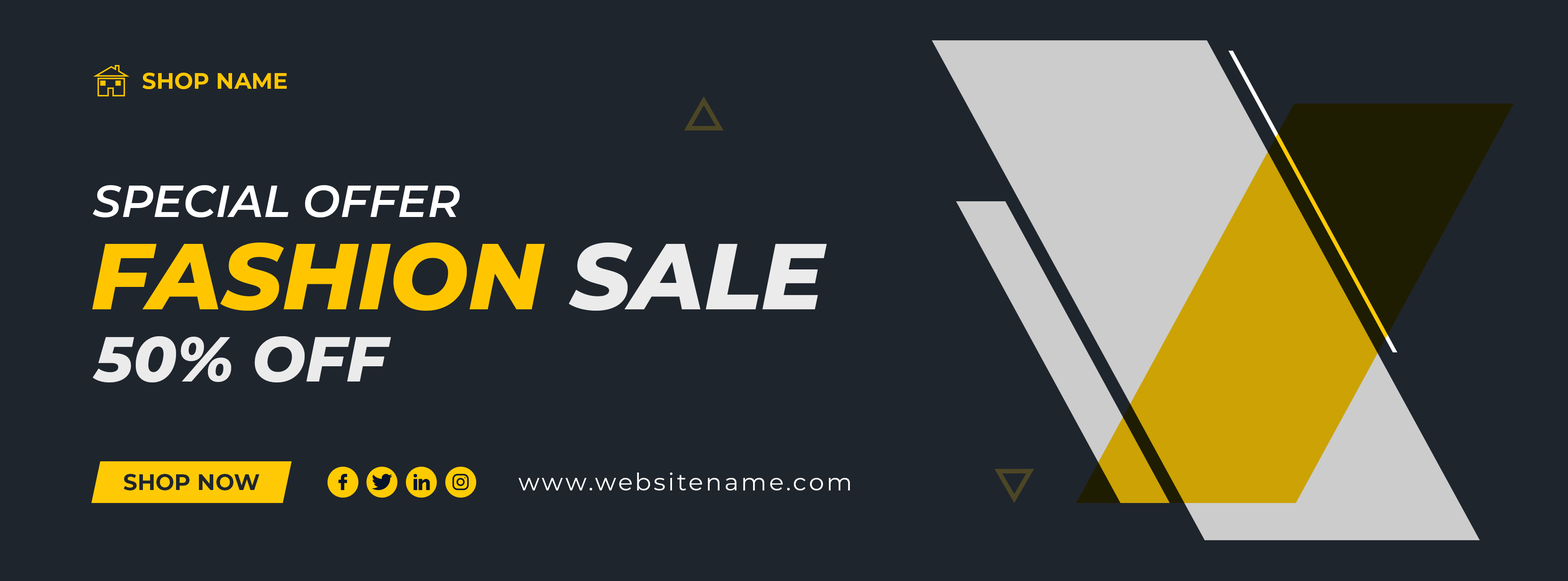
<style>
.page{position:relative;width:1568px;height:581px;background:#1f252d}
.page>*{position:absolute;margin:0}
.t1{font:22.4px "Montserrat-Bold";color:#ffc600;text-transform:uppercase}
.t2{font:44.8px "Montserrat-SemiBoldItalic";color:#ffffff;text-transform:uppercase}
.t3{font:93.3px "Montserrat-ExtraBoldItalic";color:#ffc600;text-transform:uppercase}
.t4{font:93.3px "Montserrat-ExtraBoldItalic";color:#ebebeb;text-transform:uppercase}
.t5{font:63.5px "Montserrat-ExtraBoldItalic";color:#ebebeb;text-transform:uppercase}
.t6{font:22.4px "Montserrat-Bold";color:#1f252d;text-transform:uppercase}
.t7{font:24.1px "Montserrat-Regular";letter-spacing:0.1em;color:#ffffff}
</style>
<div class="page">
<p class="t1" style="left:142px;top:73px;width:145px;height:16px">shop name</p>
<p class="t2" style="left:93px;top:185px;width:367px;height:32px">special offer</p>
<p class="t3" style="left:92px;top:242px;width:735px;height:69px">fashion <span class="t4">sale</span></p>
<p class="t5" style="left:93px;top:336px;width:298px;height:47px">50% off</p>
<p class="t6" style="left:124px;top:474px;width:135px;height:16px">shop now</p>
<p class="t7" style="left:518px;top:472px;width:332px;height:18px">www.websitename.com</p>
</div>
